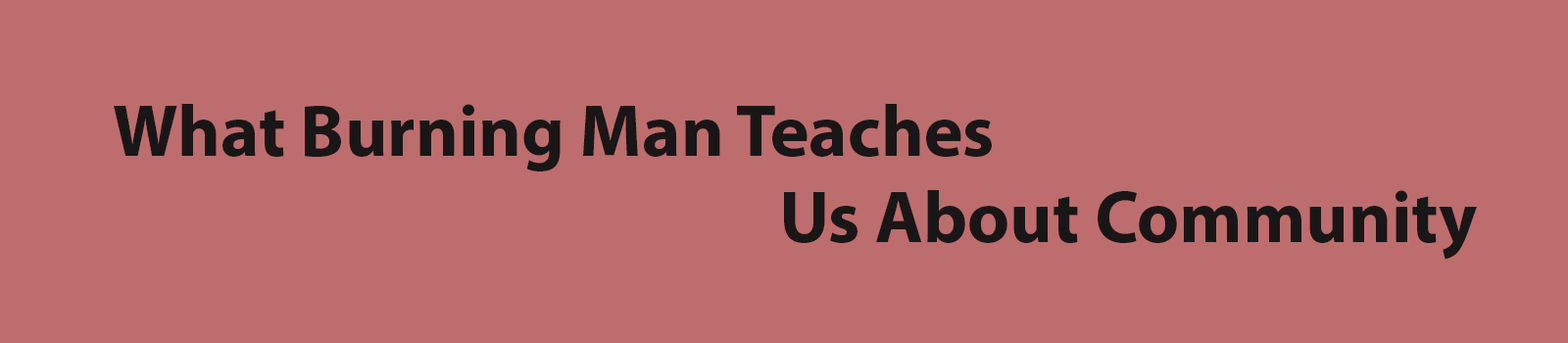
<style>
.page{position:relative;width:1568px;height:343px;background:#bd6d6d}
.page>*{position:absolute;margin:0}
.t1{font:73.5px "MyriadPro-Bold";color:#1a1617}
</style>
<div class="page">
<p class="t1" style="left:114px;top:104px;width:878px;height:68px">What Burning Man Teaches</p>
<p class="t1" style="left:784px;top:190px;width:693px;height:70px">Us About Community</p>
</div>
